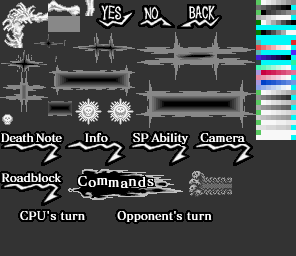
<style>
.page{position:relative;width:296px;height:256px;background:#333333}
.page>*{position:absolute;margin:0}
.t1{font:11.2px "MatisseVPro-DB";color:#ffffff}
.t2{font:11.2px "MatisseVPro-DB";letter-spacing:0.025em;color:#ffffff}
.t3{font:11.2px "MatisseVPro-DB";letter-spacing:0.01em;color:#ffffff}
.t4{font:13px "MatisseVPro-DB";letter-spacing:0.1em;color:#ffffff}
.t5{font:13px "MatisseVPro-DB";color:#ffffff}
.t6{font:11px "MatisseVPro-DB";letter-spacing:0.025em;color:#ffffff}
.t7{font:11px "MatisseVPro-DB";letter-spacing:0.05em;color:#ffffff}
.t8{font:11px "MatisseVPro-DB";letter-spacing:0.075em;color:#ffffff}
.t9{font:11.2px "MatisseVPro-DB";letter-spacing:0.05em;color:#ffffff}
</style>
<div class="page">
<p class="t1" style="left:1px;top:133px;width:61px;height:9px">Death Note</p>
<p class="t2" style="left:85px;top:133px;width:23px;height:9px">Info</p>
<p class="t3" style="left:133px;top:133px;width:56px;height:11px">SP Ability</p>
<p class="t2" style="left:200px;top:133px;width:45px;height:9px">Camera</p>
<p class="t3" style="left:1px;top:173px;width:61px;height:9px">Roadblock</p>
<p class="t4" style="left:78px;top:176px;width:76px;height:12px">C<span class="t5">om</span>m<span class="t5">a</span>nds</p>
<p class="t6" style="left:20px;top:211px;width:65px;height:9px"><span class="t7">C</span><span class="t8">P</span><span class="t9">U</span>'s turn</p>
<p class="t6" style="left:117px;top:211px;width:95px;height:11px">Opponent's turn</p>
</div>
